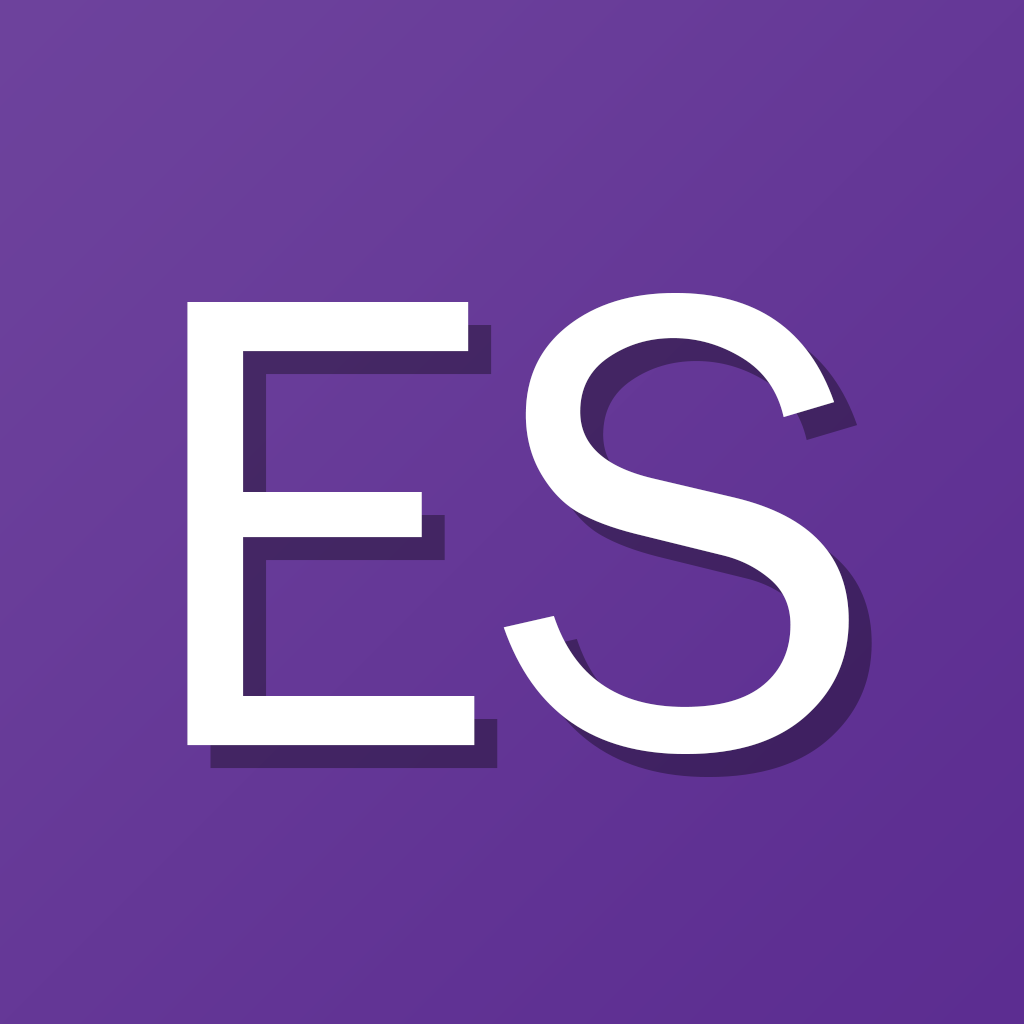
<style>
.page{position:relative;width:1024px;height:1024px}
.page>*{position:absolute;margin:0}
.t1{font:665.2px "FranklinGothic-Book";color:#ffffff}
</style>
<div class="page">
<p class="t1" style="left:187px;top:293px;width:662px;height:461px">ES</p>
</div>
